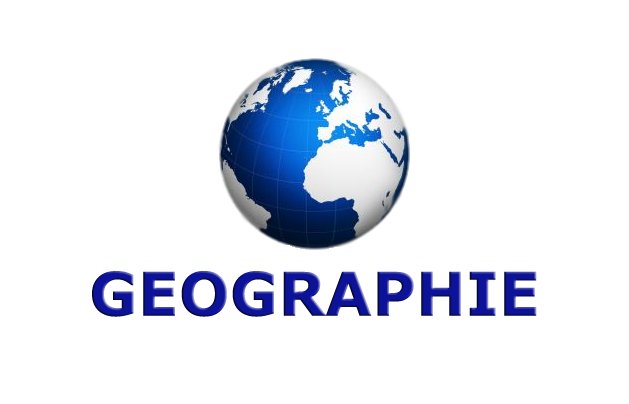
<style>
.page{position:relative;width:629px;height:404px;background:#ffffff}
.page>*{position:absolute;margin:0}
.t1{font:60px "Verdana-Bold";color:#0d1398}
</style>
<div class="page">
<p class="t1" style="left:92px;top:271px;width:445px;height:46px">GEOGRAPHIE</p>
</div>
